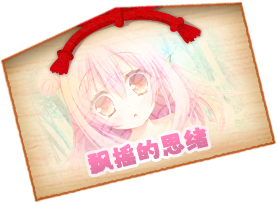
<style>
.page{position:relative;width:277px;height:203px;background:#ffffff}
.page>*{position:absolute;margin:0}
.t1{font:24px "MaokenAssortedSans";color:#f47dad;font-weight:bold}
</style>
<div class="page">
<p class="t1" style="left:87px;top:127px;width:122px;height:47px;rotate:-14deg">飘摇的思绪</p>
</div>
